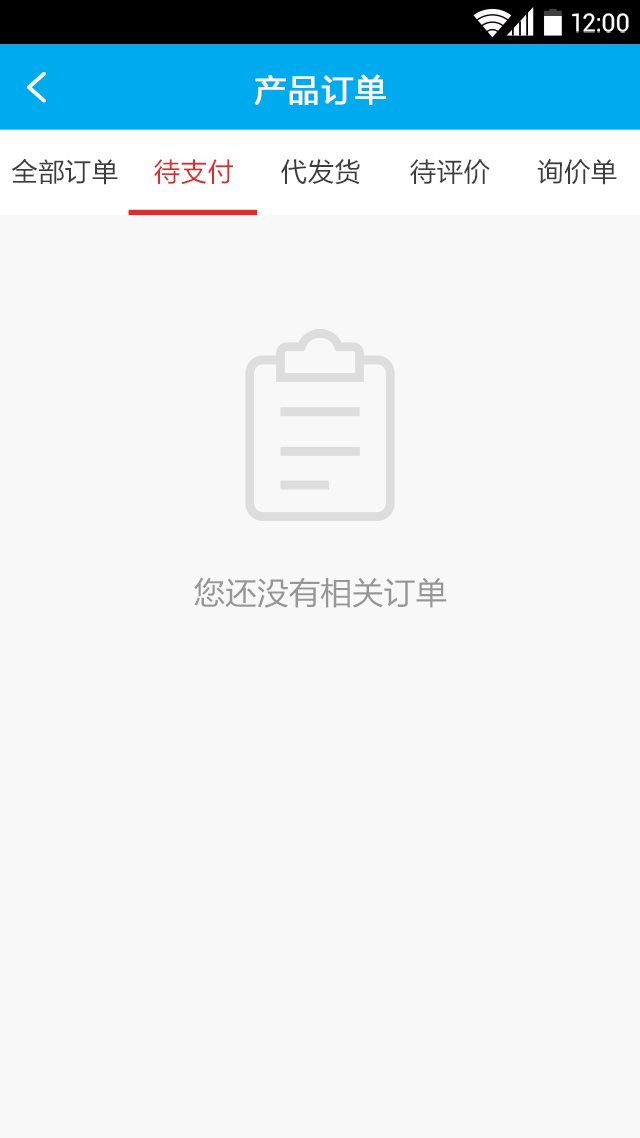
<style>
.page{position:relative;width:640px;height:1138px;background:#f8f8f8}
.page>*{position:absolute;margin:0}
.t1{font:24.9px "Roboto-Regular";color:#ffffff}
.t2{font:32px "FZLTHJW--GB1-0";letter-spacing:0.02em;color:#ffffff;font-weight:bold}
.t3{font:26.7px "FZLTHJW--GB1-0";color:#3d3d3d}
.t4{font:26.7px "FZLTHJW--GB1-0";color:#e1292e}
.t5{font:32px "FZLTHJW--GB1-0";letter-spacing:-0.01em;color:#969696;text-transform:uppercase}
</style>
<div class="page">
<p class="t1" style="left:572px;top:13px;width:57px;height:20px">12:00</p>
<p class="t2" style="left:254px;top:74px;width:132px;height:31px">产品订单</p>
<p class="t3" style="left:12px;top:159px;width:106px;height:26px">全部订单</p>
<p class="t4" style="left:154px;top:159px;width:79px;height:26px">待支付</p>
<p class="t3" style="left:281px;top:159px;width:79px;height:26px">代发货</p>
<p class="t3" style="left:410px;top:159px;width:80px;height:25px">待评价</p>
<p class="t3" style="left:537px;top:159px;width:80px;height:26px">询价单</p>
<p class="t5" style="left:194px;top:577px;width:253px;height:31px">您还没有相关订单</p>
</div>
